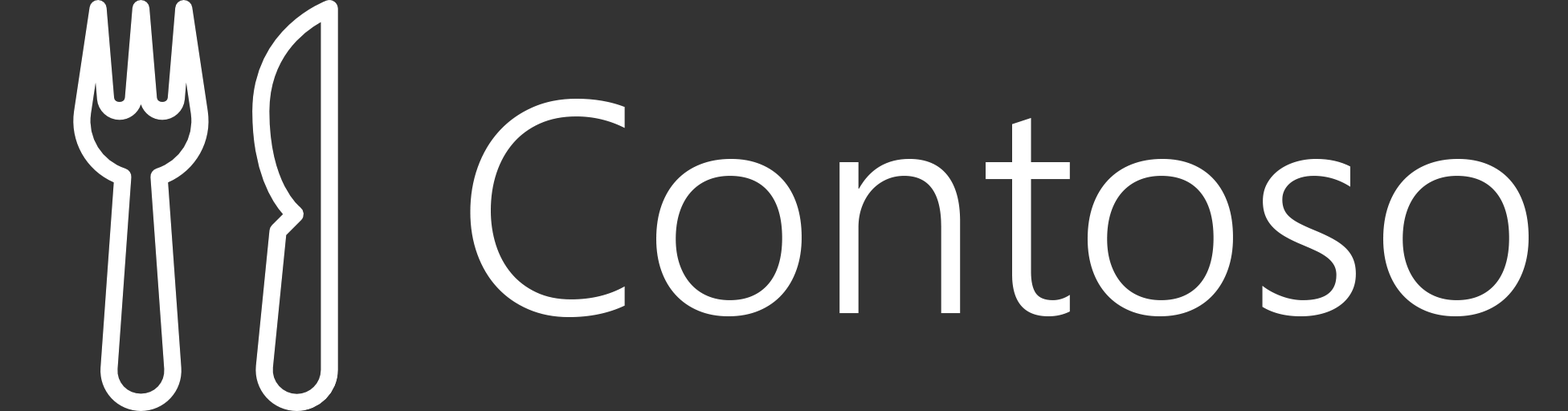
<style>
.page{position:relative;width:1568px;height:411px;background:#333333}
.page>*{position:absolute;margin:0}
.t1{font:301.2px "SegoeUI-Semilight";color:#ffffff}
</style>
<div class="page">
<p class="t1" style="left:470px;top:99px;width:1059px;height:218px">Contoso</p>
</div>
